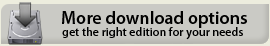
<style>
.page{position:relative;width:270px;height:46px;background:#cacac5}
.page>*{position:absolute;margin:0}
.t1{font:18px "MyriadPro-Semibold";color:#000000}
.t2{font:12px "MyriadPro-Semibold";color:#000000}
</style>
<div class="page">
<p class="t1" style="left:62px;top:11px;width:185px;height:17px">More download options</p>
<p class="t2" style="left:62px;top:27px;width:181px;height:13px">get the right edition for your needs</p>
</div>
